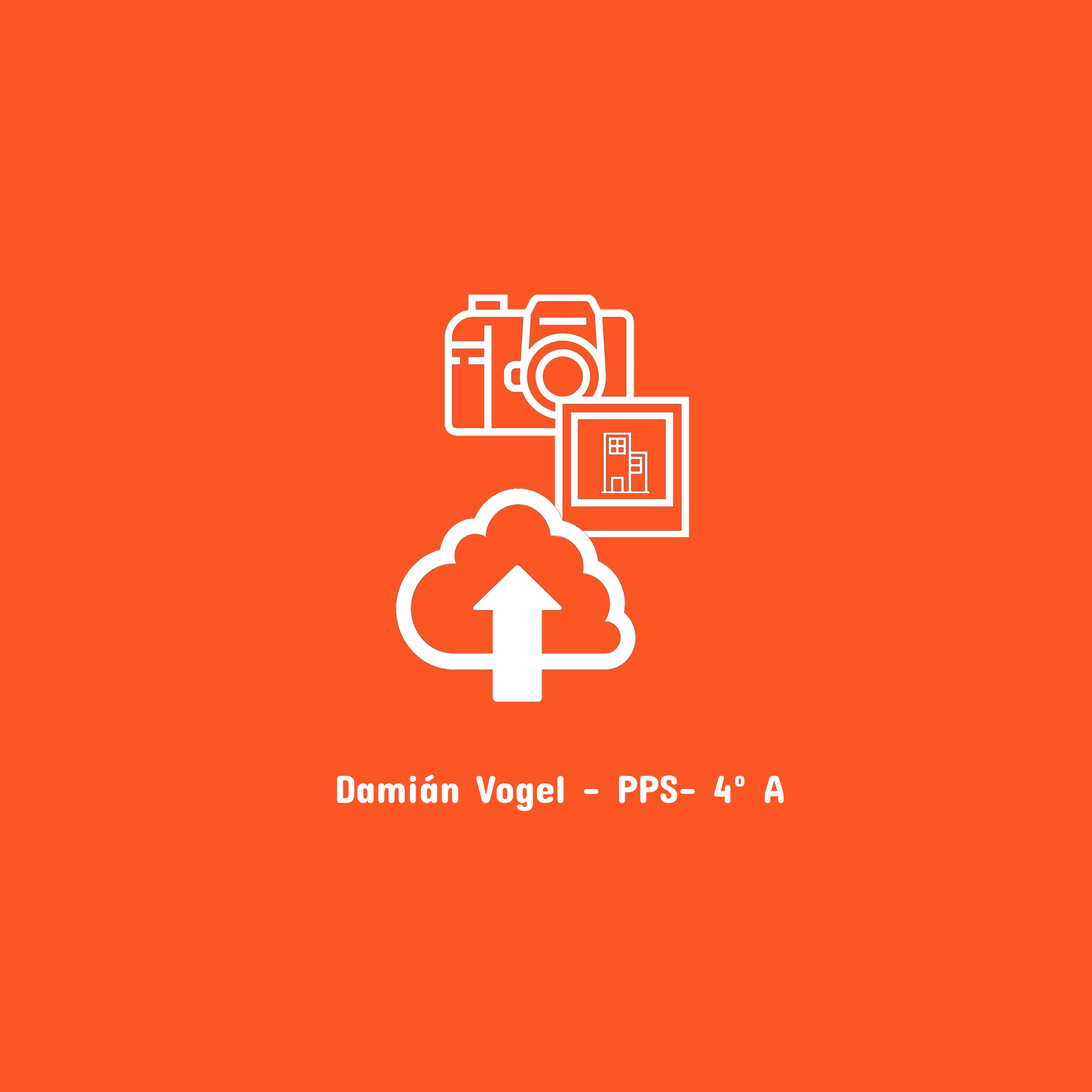
<style>
.page{position:relative;width:1092px;height:1092px;background:#fc5625}
.page>*{position:absolute;margin:0}
.t1{font:40px "ConcertOne-Regular";color:#ffffff}
</style>
<div class="page">
<p class="t1" style="left:337px;top:775px;width:447px;height:36px">Damián Vogel - PPS- 4º A</p>
</div>
